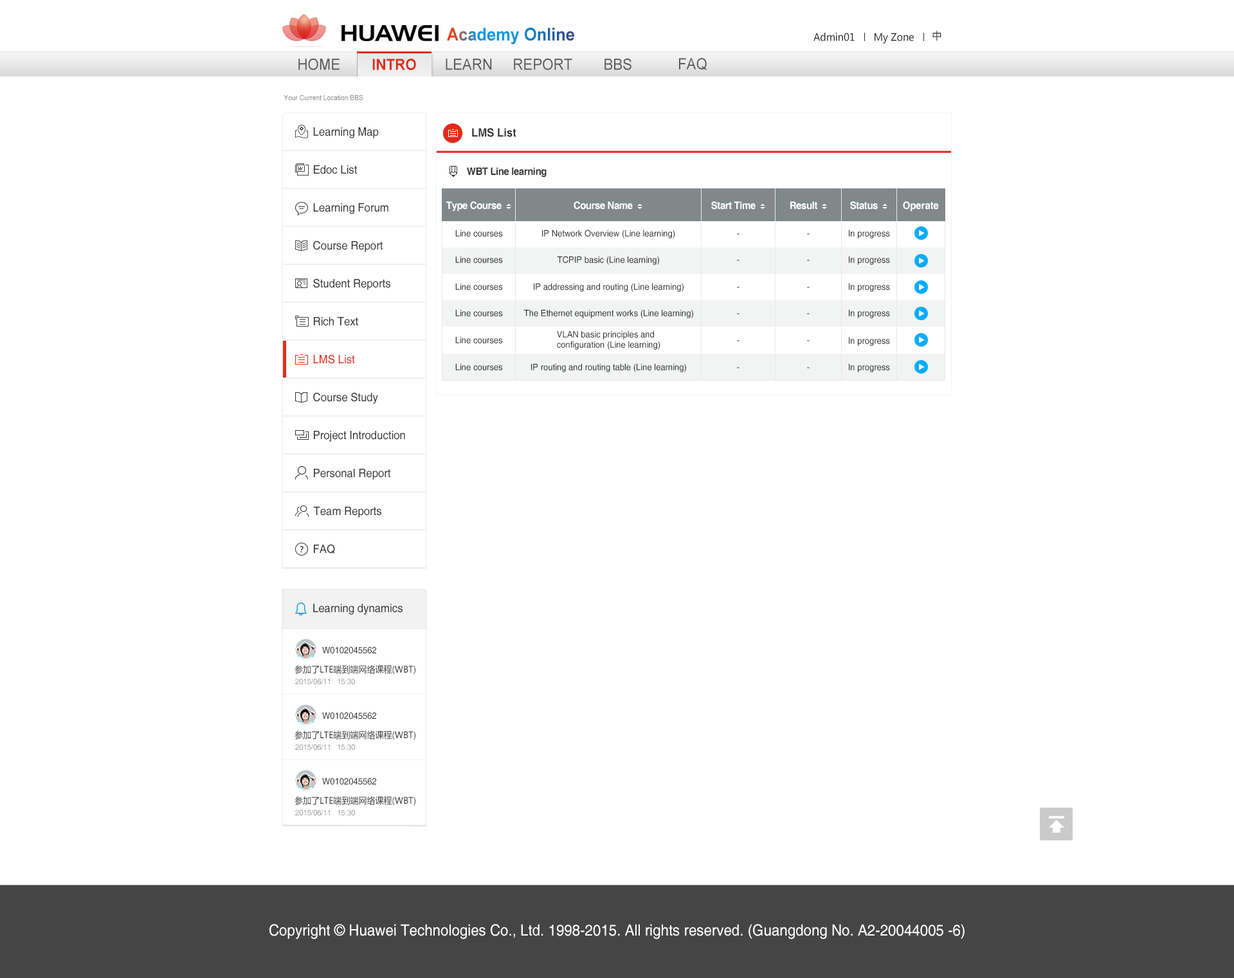
<style>
.page{position:relative;width:1234px;height:978px;background:#ffffff}
.page>*{position:absolute;margin:0}
.t1{font:17.6px "Arial-BoldMT";scale:0.93 1}
.t2{font:10.3px "MicrosoftYaHei";color:#2a2a2a;scale:0.93 1}
.t3{font:15.4px "ArialMT";color:#585858;scale:0.93 1}
.t4{font:15.4px "Arial-BoldMT";color:#e2291c;scale:0.93 1}
.t5{font:7.1px "ArialMT";color:#8d8d8d;scale:0.93 1}
.t6{font:11.6px "Helvetica";color:#333333;scale:0.93 1}
.t7{font:11.6px "Helvetica-Bold";color:#333333;scale:0.93 1}
.t8{font:10.3px "Helvetica-Bold";letter-spacing:-0.025em;color:#333333;scale:0.93 1}
.t9{font:10.3px "Helvetica-Bold";letter-spacing:-0.025em;color:#ffffff;scale:0.93 1}
.t10{font:10.3px "Helvetica-Bold";color:#ffffff;scale:0.93 1}
.t11{font:9px "Helvetica";color:#333333;scale:0.93 1}
.t12{font:9px "Helvetica";scale:0.93 1}
.t13{font:9px/10.3px "Helvetica";color:#333333;scale:0.93 1}
.t14{font:11.6px "Helvetica";color:#e2291c;scale:0.93 1}
.t15{font:9px "MicrosoftYaHei";color:#333333;scale:0.93 1}
.t16{font:7.7px "Helvetica";color:#9a9a9a;scale:0.93 1}
.t17{font:15.4px "Helvetica";color:#fffefe;scale:0.93 1}
</style>
<div class="page">
<p class="t1" style="left:447px;top:28px;width:127px;height:16px">Academy Online</p>
<p class="t2" style="left:813px;top:32px;width:41px;height:9px">Admin01</p>
<p class="t2" style="left:874px;top:33px;width:40px;height:11px">My Zone</p>
<p class="t2" style="left:932px;top:30px;width:9px;height:11px">中</p>
<p class="t3" style="left:298px;top:59px;width:41px;height:11px">HOME</p>
<p class="t4" style="left:372px;top:59px;width:44px;height:11px">INTRO</p>
<p class="t3" style="left:446px;top:59px;width:46px;height:11px">LEARN</p>
<p class="t3" style="left:514px;top:59px;width:58px;height:11px">REPORT</p>
<p class="t3" style="left:604px;top:59px;width:27px;height:11px">BBS</p>
<p class="t3" style="left:679px;top:58px;width:27px;height:12px">FAQ</p>
<p class="t5" style="left:284px;top:94px;width:79px;height:6px">Your Current Location:BBS</p>
<p class="t6" style="left:313px;top:127px;width:66px;height:11px">Learning Map</p>
<p class="t7" style="left:472px;top:128px;width:44px;height:9px">LMS List</p>
<p class="t6" style="left:314px;top:165px;width:43px;height:9px">Edoc List</p>
<p class="t8" style="left:467px;top:167px;width:79px;height:10px">WBT Line learning</p>
<p class="t6" style="left:313px;top:203px;width:75px;height:11px">Learning Forum</p>
<p class="t9" style="left:446px;top:201px;width:55px;height:11px">Type Course</p>
<p class="t9" style="left:573px;top:201px;width:60px;height:9px">Course Name</p>
<p class="t9" style="left:711px;top:201px;width:44px;height:9px">Start Time</p>
<p class="t9" style="left:790px;top:201px;width:27px;height:9px">Result</p>
<p class="t9" style="left:850px;top:201px;width:28px;height:9px">Status</p>
<p class="t10" style="left:903px;top:201px;width:36px;height:11px">Operate</p>
<p class="t11" style="left:455px;top:230px;width:48px;height:7px">Line courses</p>
<p class="t11" style="left:542px;top:230px;width:133px;height:9px">IP Network Overview (Line learning)</p>
<p class="t12" style="left:737px;top:233px;width:2px;height:2px">-</p>
<p class="t12" style="left:807px;top:233px;width:2px;height:2px">-</p>
<p class="t11" style="left:849px;top:230px;width:41px;height:9px">In progress</p>
<p class="t6" style="left:313px;top:240px;width:70px;height:12px">Course Report</p>
<p class="t11" style="left:455px;top:256px;width:48px;height:7px">Line courses</p>
<p class="t11" style="left:557px;top:256px;width:102px;height:9px">TCPIP basic (Line learning)</p>
<p class="t11" style="left:849px;top:256px;width:41px;height:9px">In progress</p>
<p class="t12" style="left:737px;top:260px;width:2px;height:1px">-</p>
<p class="t12" style="left:807px;top:260px;width:2px;height:1px">-</p>
<p class="t6" style="left:313px;top:278px;width:77px;height:12px">Student Reports</p>
<p class="t11" style="left:455px;top:283px;width:48px;height:7px">Line courses</p>
<p class="t11" style="left:534px;top:283px;width:149px;height:9px">IP addressing and routing (Line learning)</p>
<p class="t12" style="left:737px;top:287px;width:2px;height:1px">-</p>
<p class="t12" style="left:807px;top:287px;width:2px;height:1px">-</p>
<p class="t11" style="left:849px;top:283px;width:41px;height:9px">In progress</p>
<p class="t6" style="left:314px;top:317px;width:44px;height:9px">Rich Text</p>
<p class="t11" style="left:455px;top:309px;width:48px;height:7px">Line courses</p>
<p class="t11" style="left:523px;top:309px;width:170px;height:9px">The Ethernet equipment works (Line learning)</p>
<p class="t12" style="left:737px;top:313px;width:2px;height:1px">-</p>
<p class="t12" style="left:807px;top:313px;width:2px;height:1px">-</p>
<p class="t11" style="left:849px;top:309px;width:41px;height:9px">In progress</p>
<p class="t11" style="left:455px;top:336px;width:48px;height:7px">Line courses</p>
<p class="t13" style="left:557px;top:330px;width:103px;height:20px">VLAN basic principles and <br>configuration (Line learning)</p>
<p class="t12" style="left:737px;top:340px;width:2px;height:1px">-</p>
<p class="t12" style="left:807px;top:340px;width:2px;height:1px">-</p>
<p class="t11" style="left:849px;top:337px;width:41px;height:9px">In progress</p>
<p class="t14" style="left:313px;top:354px;width:42px;height:10px">LMS List</p>
<p class="t11" style="left:455px;top:363px;width:48px;height:7px">Line courses</p>
<p class="t11" style="left:531px;top:363px;width:155px;height:9px">IP routing and routing table (Line learning)</p>
<p class="t11" style="left:849px;top:363px;width:41px;height:9px">In progress</p>
<p class="t12" style="left:737px;top:367px;width:2px;height:1px">-</p>
<p class="t12" style="left:807px;top:367px;width:2px;height:1px">-</p>
<p class="t6" style="left:313px;top:392px;width:65px;height:12px">Course Study</p>
<p class="t6" style="left:314px;top:431px;width:91px;height:11px">Project Introduction</p>
<p class="t6" style="left:314px;top:469px;width:77px;height:11px">Personal Report</p>
<p class="t6" style="left:313px;top:507px;width:68px;height:11px">Team Reports</p>
<p class="t6" style="left:314px;top:544px;width:21px;height:10px">FAQ</p>
<p class="t6" style="left:313px;top:604px;width:89px;height:11px">Learning dynamics</p>
<p class="t11" style="left:322px;top:647px;width:54px;height:7px">W0102045562</p>
<p class="t15" style="left:294px;top:665px;width:121px;height:9px">参加了LTE端到端网络课程(WBT)</p>
<p class="t16" style="left:295px;top:678px;width:60px;height:7px">2015/06/11   15:30</p>
<p class="t11" style="left:322px;top:712px;width:54px;height:7px">W0102045562</p>
<p class="t15" style="left:294px;top:730px;width:121px;height:10px">参加了LTE端到端网络课程(WBT)</p>
<p class="t16" style="left:295px;top:744px;width:60px;height:6px">2015/06/11   15:30</p>
<p class="t11" style="left:322px;top:778px;width:54px;height:7px">W0102045562</p>
<p class="t15" style="left:294px;top:796px;width:121px;height:10px">参加了LTE端到端网络课程(WBT)</p>
<p class="t16" style="left:295px;top:809px;width:60px;height:7px">2015/06/11   15:30</p>
<p class="t17" style="left:269px;top:924px;width:695px;height:15px">Copyright © Huawei Technologies Co., Ltd. 1998-2015. All rights reserved. (Guangdong No. A2-20044005 -6)</p>
</div>
